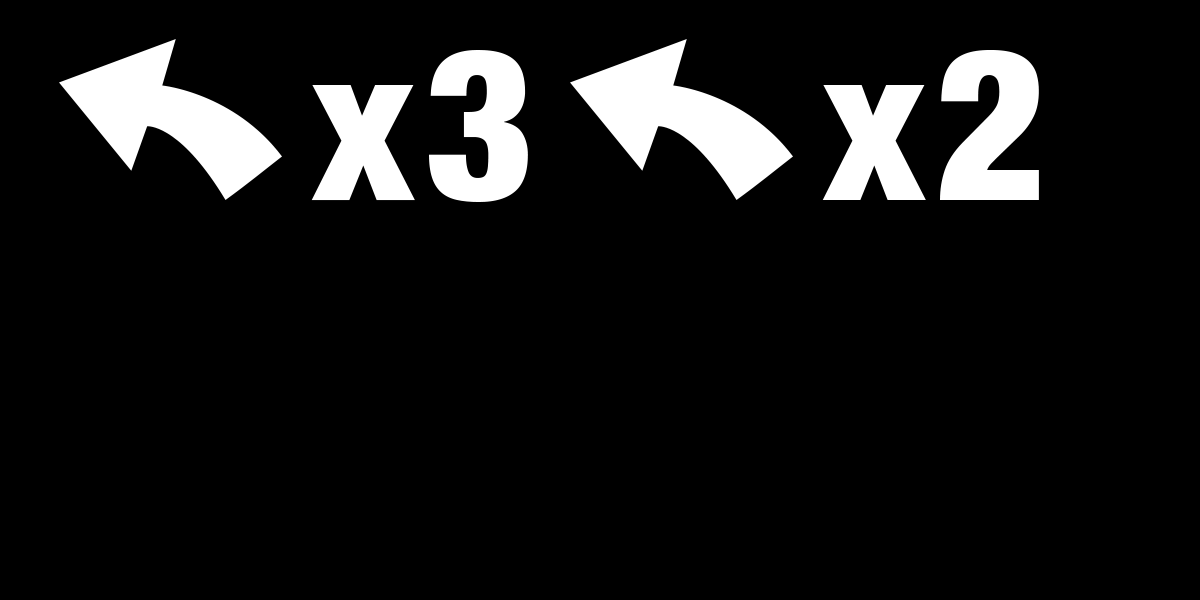
<style>
.page{position:relative;width:1200px;height:600px;background:#000000}
.page>*{position:absolute;margin:0}
.t1{font:211.9px "HelveticaNeue-CondensedBlack";letter-spacing:0.05em;color:#ffffff}
</style>
<div class="page">
<p class="t1" style="left:311px;top:50px;width:217px;height:152px">x3</p>
<p class="t1" style="left:822px;top:50px;width:217px;height:150px">x2</p>
</div>
